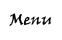
<style>
.page{position:relative;width:62px;height:40px;background:#ffffff}
.page>*{position:absolute;margin:0}
.t1{font:16px "VinerHandITC";color:#000000}
</style>
<div class="page">
<p class="t1" style="left:9px;top:13px;width:43px;height:13px">Menu</p>
</div>
